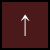
<style>
.page{position:relative;width:50px;height:50px;background:#4b1919}
.page>*{position:absolute;margin:0}
.t1{font:24px "H2gtrE";color:#ffffff}
</style>
<div class="page">
<p class="t1" style="left:21px;top:14px;width:9px;height:22px">↑</p>
</div>
